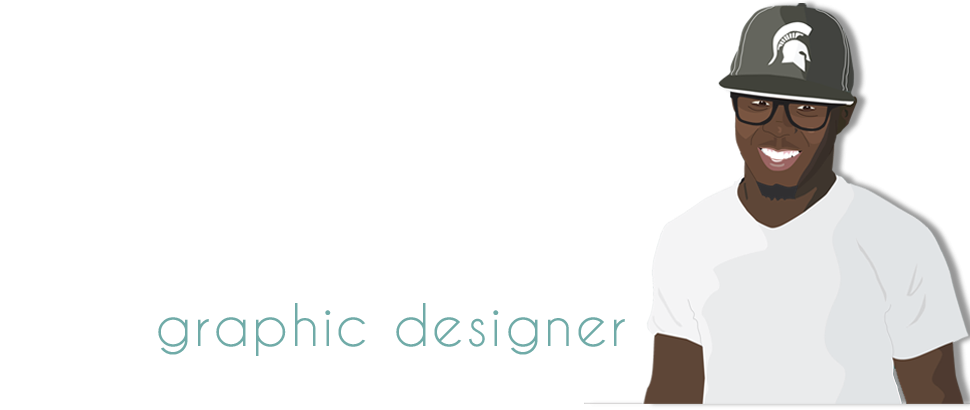
<style>
.page{position:relative;width:970px;height:410px;background:#ffffff}
.page>*{position:absolute;margin:0}
.t1{font:55px "CaviarDreams";letter-spacing:0.05em;color:#70aba8}
</style>
<div class="page">
<p class="t1" style="left:158px;top:303px;width:467px;height:53px">graphic designer</p>
</div>
